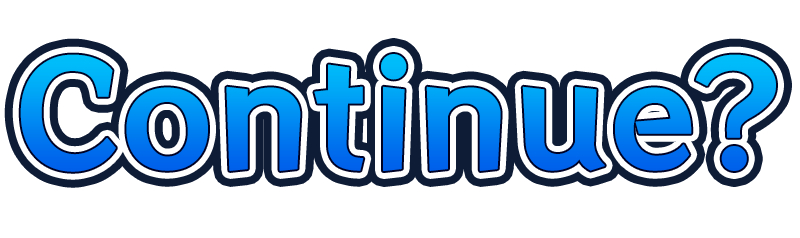
<style>
.page{position:relative;width:800px;height:238px;background:#ffffff}
.page>*{position:absolute;margin:0}
.t1{font:141.7px "RocknRollOne-Regular";font-weight:bold}
</style>
<div class="page">
<p class="t1" style="left:20px;top:54px;width:756px;height:118px">Continue？</p>
</div>
